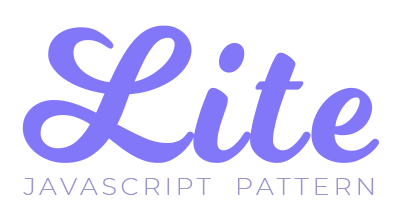
<style>
.page{position:relative;width:400px;height:224px;background:#ffffff}
.page>*{position:absolute;margin:0}
.t1{font:187.2px "Milkshake";letter-spacing:0.05em;color:#8377f9}
.t2{font:25.2px "Montserrat-Light";letter-spacing:0.15em;color:#9b95ce}
</style>
<div class="page">
<p class="t1" style="left:22px;top:25px;width:358px;height:138px">Lite</p>
<p class="t2" style="left:23px;top:178px;width:351px;height:17px">JAVASCRIPT  PATTERN</p>
</div>
